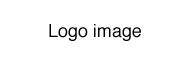
<style>
.page{position:relative;width:190px;height:60px;background:#ffffff}
.page>*{position:absolute;margin:0}
.t1{font:18px "Helvetica";color:#000000}
</style>
<div class="page">
<p class="t1" style="left:49px;top:24px;width:92px;height:17px">Logo image</p>
</div>
